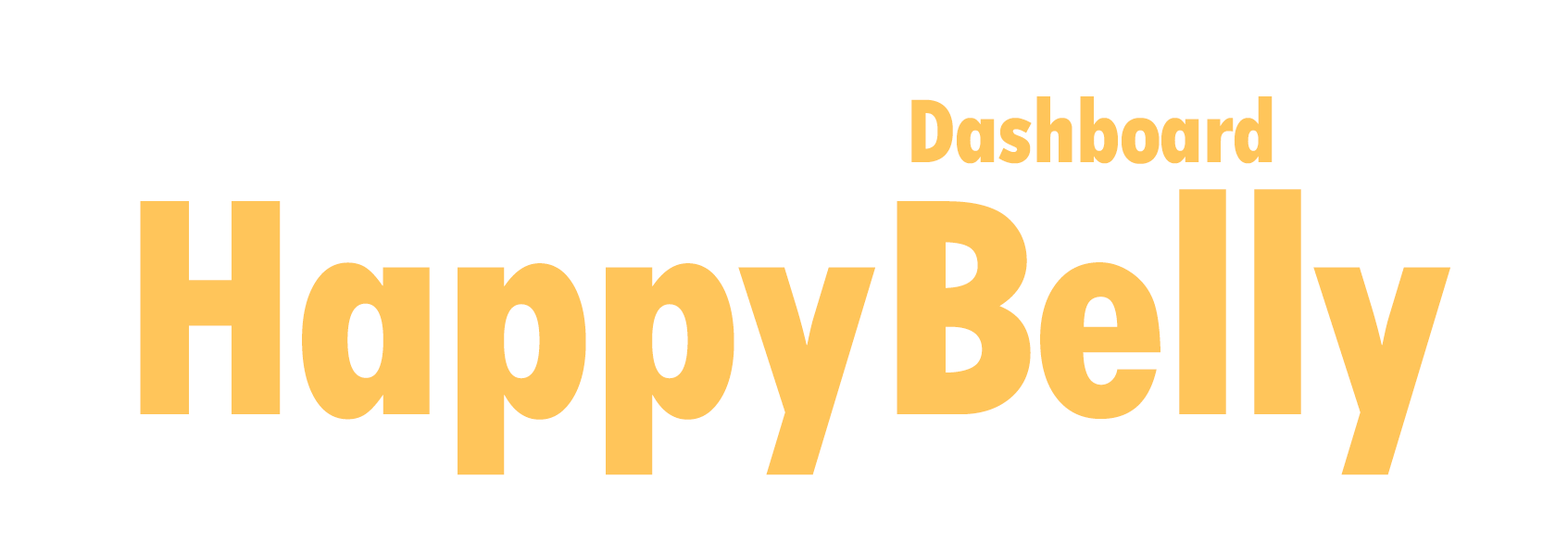
<style>
.page{position:relative;width:1568px;height:556px;background:#ffffff}
.page>*{position:absolute;margin:0}
.t1{font:95.5px "TwCenMT-CondensedExtraBold";letter-spacing:-0.02em;color:#ffc55a}
.t2{font:326.5px "TwCenMT-CondensedExtraBold";letter-spacing:-0.02em;color:#ffc55a}
</style>
<div class="page">
<p class="t1" style="left:911px;top:96px;width:362px;height:68px">Dashboard</p>
<p class="t2" style="left:140px;top:189px;width:1310px;height:286px">HappyBelly</p>
</div>
